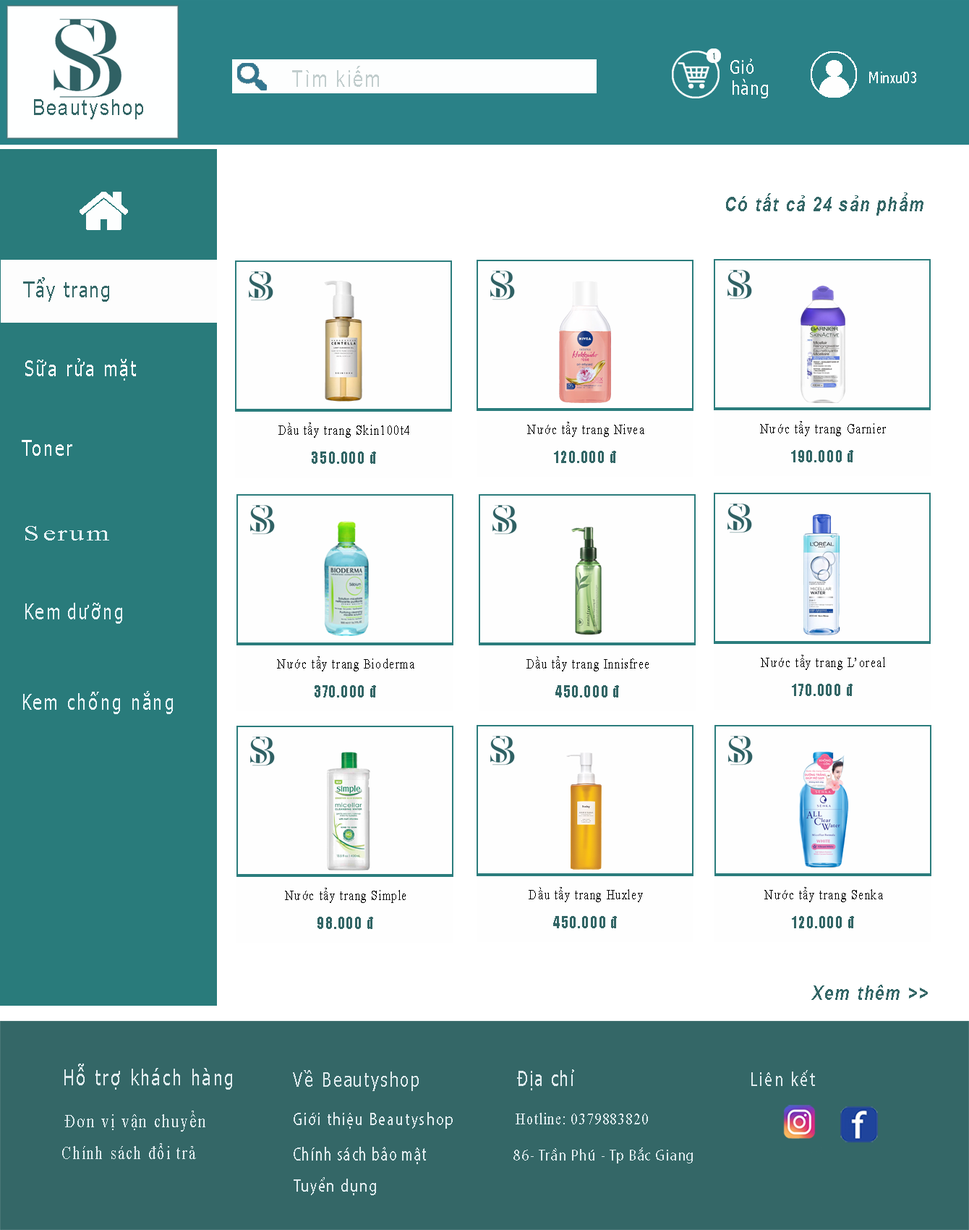
<style>
.page{position:relative;width:969px;height:1230px;background:#fefefe}
.page>*{position:absolute;margin:0}
.t1{font:9px "Tahoma";letter-spacing:0.1em;color:#336666;scale:0.83 1}
.t2{font:22.9px "ArialMT";letter-spacing:0.1em;color:#c1cdcd;scale:0.8 1}
.t3{font:19.1px "Tahoma";letter-spacing:0.1em;color:#ffffff;scale:0.8 1}
.t4{font:15.1px "Tahoma";color:#ffffff;scale:0.8 1}
.t5{font:18.6px "Tahoma";letter-spacing:0.1em;color:#ffffff;scale:0.8 1}
.t6{font:22.4px "ArialMT";letter-spacing:0.1em;color:#336666;scale:0.8 1}
.t7{font:20.1px "Arial-BoldItalicMT";letter-spacing:0.1em;color:#336666;scale:0.8 1}
.t8{font:21.4px "Tahoma";letter-spacing:0.1em;color:#336666;scale:0.85 1}
.t9{font:21.4px "Tahoma";letter-spacing:0.1em;color:#ffffff;scale:0.8 1}
.t10{font:14.2px "TimesNewRomanPSMT";letter-spacing:0.1em;color:#000000;scale:0.8 1}
.t11{font:21.4px "Tahoma";letter-spacing:0.1em;color:#ffffff;scale:0.81 1}
.t12{font:16px "Impact";letter-spacing:0.1em;color:#336666;scale:0.8 1}
.t13{font:21.4px "TimesNewRomanPSMT";letter-spacing:0.1em;color:#e6f3f6;scale:1.36 1}
.t14{font:21.4px "Tahoma";letter-spacing:0.1em;color:#e6f3f6;scale:0.81 1}
.t15{font:21.4px "Tahoma";letter-spacing:0.1em;color:#dfebee;scale:0.8 1}
.t16{font:20.2px "Tahoma";letter-spacing:0.1em;color:#dfebee;scale:0.8 1}
.t17{font:21.2px "Tahoma";letter-spacing:0.1em;color:#dfebee;scale:0.73 1}
.t18{font:20px "MyriadPro-Regular";letter-spacing:0.1em;color:#dfebee;scale:0.81 1}
.t19{font:18.8px "TimesNewRomanPSMT";letter-spacing:0.1em;color:#dfebee;scale:0.8 1}
.t20{font:17.6px "MyriadPro-Regular";letter-spacing:0.1em;color:#dfebee;scale:0.8 1}
.t21{font:16px "TimesNewRomanPSMT";letter-spacing:0.1em;color:#dfebee;scale:0.8 1}
.t22{font:18.3px "TimesNewRomanPSMT";letter-spacing:0.1em;color:#dfebee;scale:0.8 1}
.t23{font:19px "MyriadPro-Regular";letter-spacing:0.1em;color:#dfebee;scale:0.7 1}
.t24{font:16px "MyriadPro-Regular";letter-spacing:0.1em;color:#dfebee;scale:0.8 1}
.t25{font:17.7px "MyriadPro-Regular";letter-spacing:0.1em;color:#dfebee;scale:0.8 1}
</style>
<div class="page">
<p class="t1" style="left:713px;top:53px;width:3px;height:6px">1</p>
<p class="t2" style="left:292px;top:66px;width:87px;height:21px">Tìm kiếm</p>
<p class="t3" style="left:731px;top:59px;width:23px;height:15px">Giỏ</p>
<p class="t4" style="left:870px;top:72px;width:47px;height:11px">Minxu03</p>
<p class="t5" style="left:733px;top:79px;width:35px;height:19px">hàng</p>
<p class="t6" style="left:34px;top:99px;width:109px;height:20px">Beautyshop</p>
<p class="t7" style="left:726px;top:192px;width:198px;height:24px">Có tất cả 24 sản phẩm</p>
<p class="t8" style="left:23px;top:277px;width:86px;height:25px">Tẩy trang</p>
<p class="t9" style="left:25px;top:358px;width:111px;height:23px">Sữa rửa mặt</p>
<p class="t10" style="left:279px;top:423px;width:131px;height:15px">Dầu tẩy trang Skin100t4</p>
<p class="t10" style="left:527px;top:422px;width:118px;height:15px">Nước tẩy trang Nivea</p>
<p class="t10" style="left:760px;top:421px;width:126px;height:15px">Nước tẩy trang Garnier</p>
<p class="t11" style="left:22px;top:440px;width:50px;height:16px">Toner</p>
<p class="t12" style="left:312px;top:451px;width:64px;height:13px">350.000 đ</p>
<p class="t12" style="left:554px;top:451px;width:62px;height:12px">120.000 đ</p>
<p class="t12" style="left:792px;top:450px;width:62px;height:12px">190.000 đ</p>
<p class="t13" style="left:25px;top:526px;width:84px;height:14px">Serum</p>
<p class="t14" style="left:25px;top:603px;width:97px;height:21px">Kem dưỡng</p>
<p class="t10" style="left:277px;top:656px;width:138px;height:15px">Nước tẩy trang Bioderma</p>
<p class="t10" style="left:527px;top:656px;width:122px;height:15px">Dầu tẩy trang Innisfree</p>
<p class="t10" style="left:761px;top:655px;width:125px;height:15px">Nước tẩy trang L’oreal</p>
<p class="t12" style="left:315px;top:685px;width:61px;height:12px">370.000 đ</p>
<p class="t12" style="left:556px;top:685px;width:63px;height:12px">450.000 đ</p>
<p class="t12" style="left:792px;top:684px;width:61px;height:12px">170.000 đ</p>
<p class="t14" style="left:23px;top:691px;width:150px;height:23px">Kem chống nắng</p>
<p class="t10" style="left:285px;top:888px;width:121px;height:15px">Nước tẩy trang Simple</p>
<p class="t10" style="left:529px;top:887px;width:114px;height:15px">Dầu tẩy trang Huxley</p>
<p class="t10" style="left:765px;top:887px;width:118px;height:15px">Nước tẩy trang Senka</p>
<p class="t12" style="left:318px;top:917px;width:55px;height:12px">98.000 đ</p>
<p class="t12" style="left:553px;top:916px;width:64px;height:12px">450.000 đ</p>
<p class="t12" style="left:792px;top:916px;width:62px;height:12px">120.000 đ</p>
<p class="t7" style="left:812px;top:985px;width:116px;height:15px">Xem thêm &gt;&gt;</p>
<p class="t15" style="left:64px;top:1064px;width:168px;height:26px">Hỗ trợ khách hàng</p>
<p class="t16" style="left:293px;top:1070px;width:126px;height:21px">Về Beautyshop</p>
<p class="t17" style="left:517px;top:1069px;width:57px;height:21px">Địa chỉ</p>
<p class="t18" style="left:752px;top:1070px;width:63px;height:16px">Liên kết</p>
<p class="t19" style="left:64px;top:1111px;width:141px;height:21px">Đơn vị vận chuyển</p>
<p class="t20" style="left:294px;top:1112px;width:159px;height:17px">Giới thiệu Beautyshop</p>
<p class="t21" style="left:516px;top:1113px;width:132px;height:11px">Hotline: 0379883820</p>
<p class="t22" style="left:62px;top:1143px;width:134px;height:16px">Chính sách đổi trả</p>
<p class="t23" style="left:294px;top:1147px;width:132px;height:17px">Chính sách bảo mật</p>
<p class="t24" style="left:514px;top:1147px;width:179px;height:16px">86- Trần Phú - Tp Bắc Giang</p>
<p class="t25" style="left:294px;top:1177px;width:82px;height:18px">Tuyển dụng</p>
</div>
